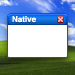
<style>
.page{position:relative;width:75px;height:75px;background:#ffffff}
.page>*{position:absolute;margin:0}
.t1{font:8px "Helvetica-Bold";color:#ffffff}
</style>
<div class="page">
<p class="t1" style="left:12px;top:16px;width:24px;height:7px">Native</p>
</div>
